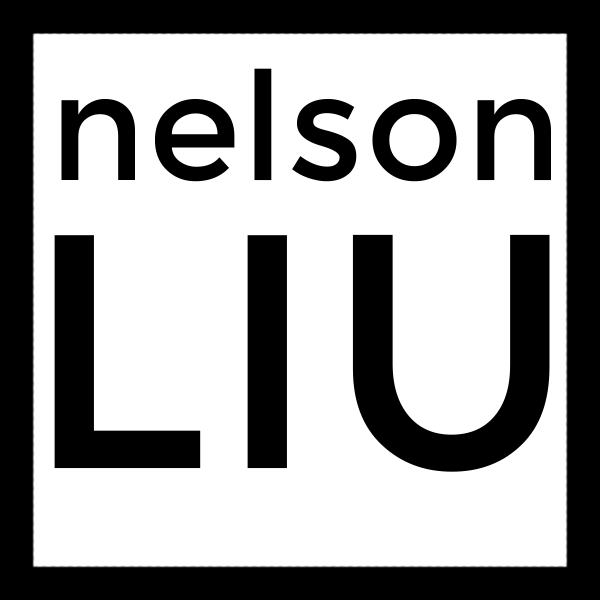
<style>
.page{position:relative;width:600px;height:600px;background:#ffffff}
.page>*{position:absolute;margin:0}
.t1{font:150px "Montserrat-Regular";color:#000000}
.t2{font:333.3px "Montserrat-Regular";color:#000000}
</style>
<div class="page">
<p class="t1" style="left:61px;top:68px;width:490px;height:114px">nelson</p>
<p class="t2" style="left:54px;top:234px;width:496px;height:238px">LIU</p>
</div>
